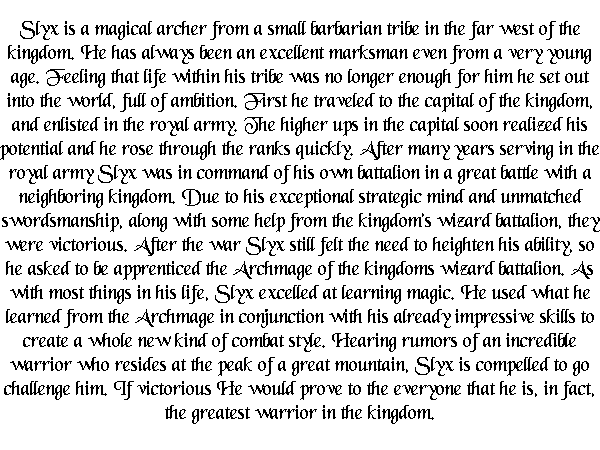
<style>
.page{position:relative;width:600px;height:450px;background:#ffffff}
.page>*{position:absolute;margin:0}
.t1{font:20px "BlackChancery";color:#000000}
</style>
<div class="page">
<p class="t1" style="left:0px;top:21px;width:600px;height:403px;text-align:center">Slyx is a magical archer from a small barbarian tribe in the far west of the kingdom. He has always been an excellent marksman even from a very young age. Feeling that life within his tribe was no longer enough for him he set out into the world, full of ambition. First he traveled to the capital of the kingdom, and enlisted in the royal army. The higher ups in the capital soon realized his potential and he rose through the ranks quickly. After many years serving in the royal army Slyx was in command of his own battalion in a great battle with a neighboring kingdom. Due to his exceptional strategic mind and unmatched swordsmanship, along with some help from the kingdom’s wizard battalion, they were victorious. After the war Slyx still felt the need to heighten his ability, so he asked to be apprenticed the Archmage of the kingdoms wizard battalion. As with most things in his life, Slyx excelled at learning magic. He used what he learned from the Archmage in conjunction with his already impressive skills to create a whole new kind of combat style. Hearing rumors of an incredible warrior who resides at the peak of a great mountain, Slyx is compelled to go challenge him. If victorious He would prove to the everyone that he is, in fact, the greatest warrior in the kingdom.</p>
</div>
